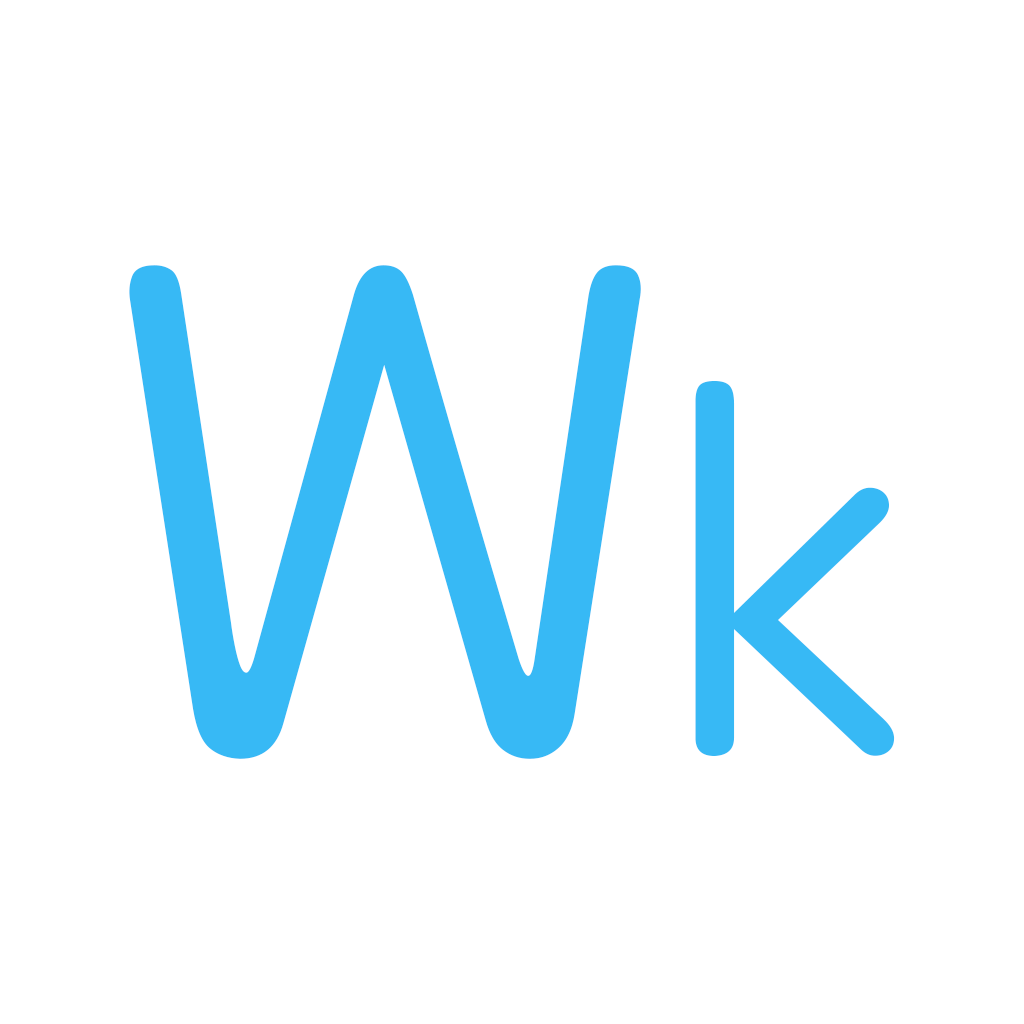
<style>
.page{position:relative;width:1024px;height:1024px;background:#ffffff}
.page>*{position:absolute;margin:0}
.t1{font:700px "STYuanti-SC-Regular";color:#37b9f5}
.t2{font:500px "STYuanti-SC-Regular";color:#37b9f5}
</style>
<div class="page">
<p class="t1" style="left:129px;top:265px;width:766px;height:494px">W<span class="t2">k</span></p>
</div>
